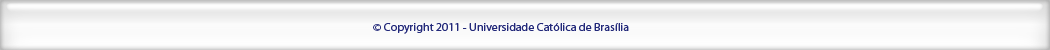
<style>
.page{position:relative;width:1050px;height:50px}
.page>*{position:absolute;margin:0}
.t1{font:11px "MyriadPro-Regular";color:#23297a;scale:1.08 1}
.t2{font:24px "MyriadPro-Regular";color:#060606;scale:1.08 1}
</style>
<div class="page">
<p class="t1" style="left:373px;top:23px;width:256px;height:11px"><span class="t2">                </span>© Copyright 2011 - Universidade Católica de Brasília</p>
</div>
